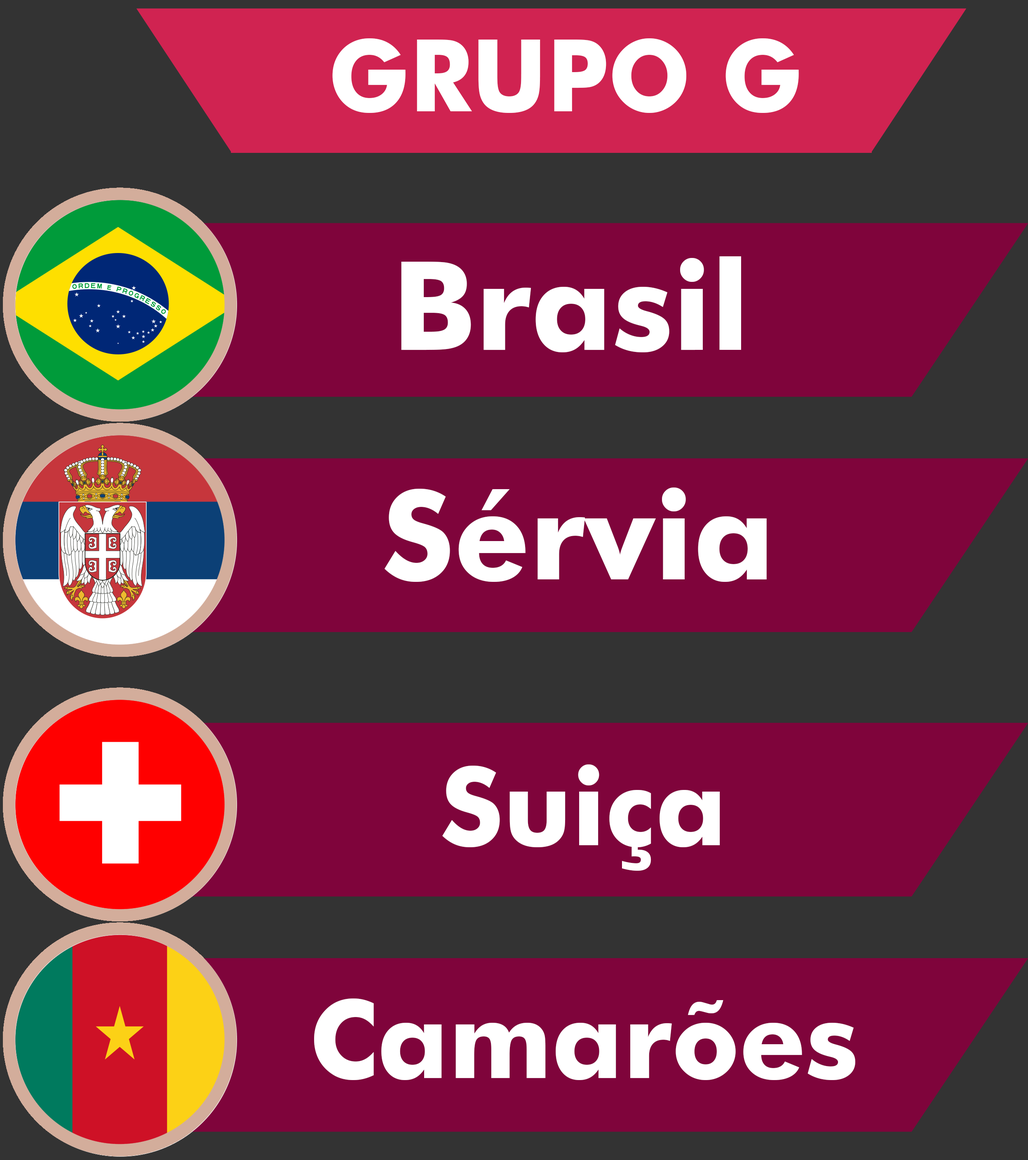
<style>
.page{position:relative;width:1028px;height:1160px;background:#7f043b}
.page>*{position:absolute;margin:0}
.t1{font:100.5px "FuturaBT-Bold";color:#ffffff;scale:0.96 1}
.t2{font:123.6px "FuturaBT-Bold";color:#ffffff}
.t3{font:108.5px "FuturaBT-Bold";color:#ffffff}
</style>
<div class="page">
<p class="t1" style="left:332px;top:38px;width:467px;height:75px">GRUPO G</p>
<p class="t2" style="left:401px;top:256px;width:340px;height:96px">Brasil</p>
<p class="t2" style="left:384px;top:488px;width:383px;height:94px">Sérvia</p>
<p class="t3" style="left:442px;top:764px;width:278px;height:107px">Suiça</p>
<p class="t3" style="left:314px;top:999px;width:541px;height:81px">Camarões</p>
</div>
